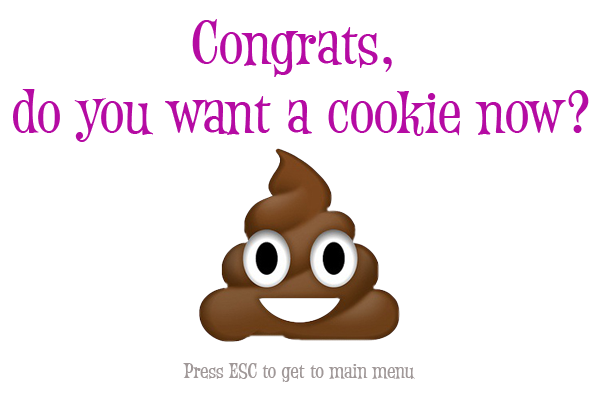
<style>
.page{position:relative;width:600px;height:400px;background:#ffffff}
.page>*{position:absolute;margin:0}
.t1{font:58px "FanfareJF";color:#b50ba3}
.t2{font:58px "FanfareJF";color:#bfbfbf}
.t3{font:20px "FanfareJF";color:#a09898}
</style>
<div class="page">
<p class="t1" style="left:13px;top:19px;width:576px;height:123px;text-align:center"><span class="t2"><br></span>Congrats, <br>do you want a cookie now?</p>
<p class="t3" style="left:183px;top:363px;width:232px;height:19px">Press ESC to get to main menu</p>
</div>
